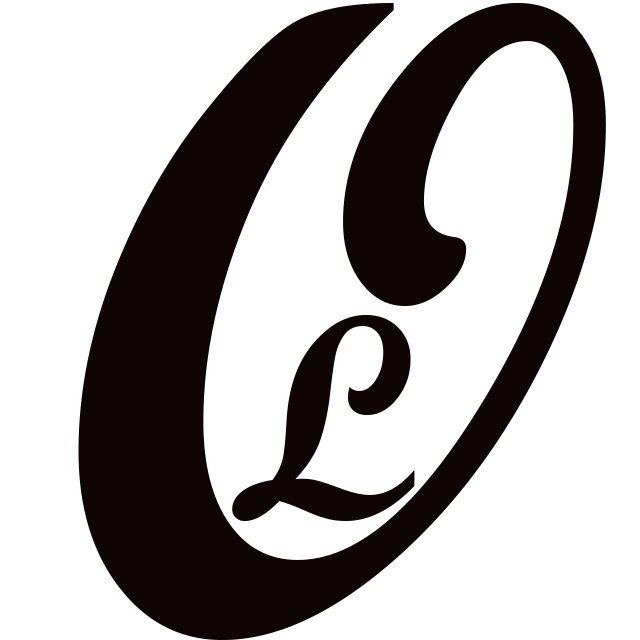
<style>
.page{position:relative;width:640px;height:640px;background:#ffffff}
.page>*{position:absolute;margin:0}
.t1{font:900px "ScriptMTBold";color:#0f0505}
.t2{font:290px "ScriptMTBold";color:#0f0505}
</style>
<div class="page">
<p class="t1" style="left:78px;top:2px;width:528px;height:638px">O</p>
<p class="t2" style="left:232px;top:314px;width:183px;height:207px">L</p>
</div>
